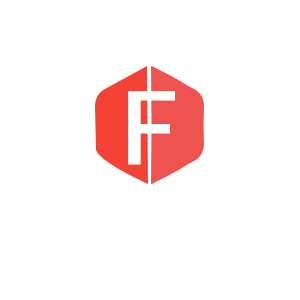
<style>
.page{position:relative;width:300px;height:300px;background:#ffffff}
.page>*{position:absolute;margin:0}
.t1{font:100px "Lato-Regular";color:#ffffff;font-weight:bold}
</style>
<div class="page">
<p class="t1" style="left:128px;top:91px;width:47px;height:74px">F</p>
</div>
